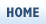
<style>
.page{position:relative;width:46px;height:24px}
.page>*{position:absolute;margin:0}
.t1{font:14px "Humanist521BT-BoldCondensed";color:#2d5078}
</style>
<div class="page">
<p class="t1" style="left:7px;top:7px;width:32px;height:10px">HOME</p>
</div>
